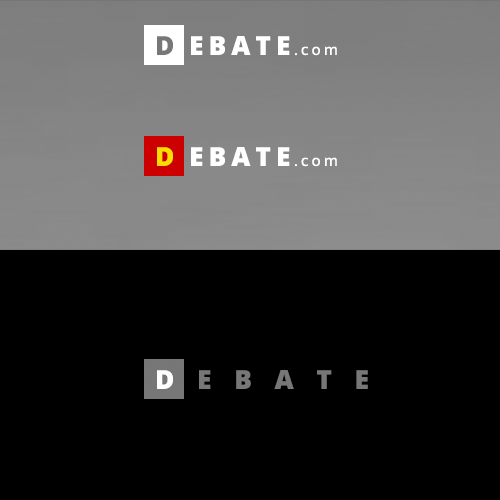
<style>
.page{position:relative;width:500px;height:500px;background:#000000}
.page>*{position:absolute;margin:0}
.t1{font:26px "OpenSans-Extrabold";letter-spacing:0.88em;color:#777777}
.t2{font:26px "OpenSans-Extrabold";letter-spacing:0.2em;color:#ffffff}
.t3{font:15px "PTSans-Caption";letter-spacing:0.2em;color:#ffffff}
.t4{font:26px "OpenSans-Extrabold";letter-spacing:0.88em;color:#fcdc05}
.t5{font:26px "OpenSans-Extrabold";letter-spacing:0.88em;color:#ffffff}
</style>
<div class="page">
<p class="t1" style="left:157px;top:36px;width:16px;height:19px">D</p>
<p class="t2" style="left:191px;top:36px;width:99px;height:19px">EBATE</p>
<p class="t3" style="left:294px;top:46px;width:43px;height:10px">.com</p>
<p class="t4" style="left:157px;top:147px;width:16px;height:19px">D</p>
<p class="t2" style="left:191px;top:147px;width:99px;height:19px">EBATE</p>
<p class="t3" style="left:294px;top:157px;width:43px;height:10px">.com</p>
<p class="t1" style="left:157px;top:370px;width:211px;height:19px"><span class="t5">D</span>EBATE</p>
</div>
